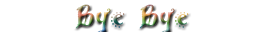
<style>
.page{position:relative;width:256px;height:32px;background:#ffffff}
.page>*{position:absolute;margin:0}
.t1{font:30px "ARHERMANN"}
</style>
<div class="page">
<p class="t1" style="left:75px;top:4px;width:114px;height:30px">Bye Bye</p>
</div>
